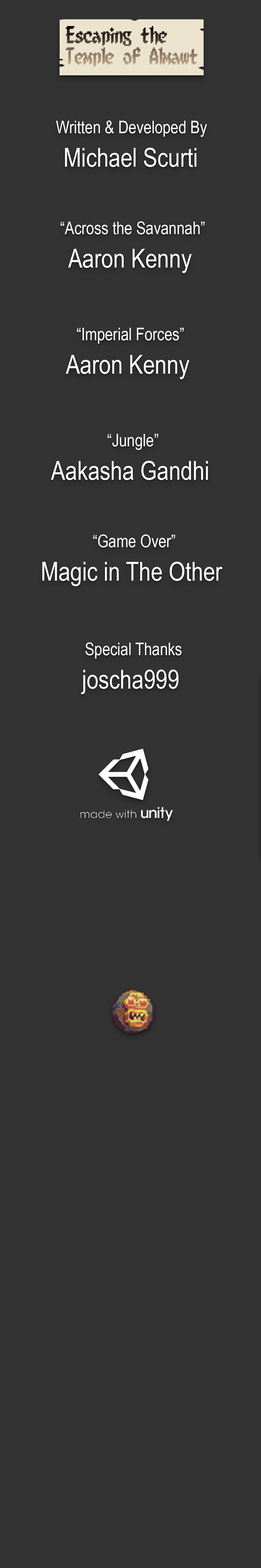
<style>
.page{position:relative;width:261px;height:1568px;background:#333333}
.page>*{position:absolute;margin:0}
.t1{font:17.4px "ArialNarrow";color:#ffffff}
.t2{font:26.1px "ArialNarrow";color:#ffffff}
</style>
<div class="page">
<p class="t1" style="left:56px;top:120px;width:151px;height:17px">Written &amp; Developed By</p>
<p class="t2" style="left:65px;top:148px;width:132px;height:19px">Michael Scurti</p>
<p class="t1" style="left:61px;top:221px;width:144px;height:13px">“Across the Savannah”</p>
<p class="t2" style="left:68px;top:249px;width:124px;height:24px">Aaron Kenny</p>
<p class="t1" style="left:77px;top:328px;width:107px;height:16px">“Imperial Forces”</p>
<p class="t2" style="left:66px;top:355px;width:124px;height:24px">Aaron Kenny</p>
<p class="t1" style="left:108px;top:434px;width:50px;height:16px">“Jungle”</p>
<p class="t2" style="left:51px;top:461px;width:157px;height:19px">Aakasha Gandhi</p>
<p class="t1" style="left:93px;top:534px;width:82px;height:13px">“Game Over”</p>
<p class="t2" style="left:42px;top:562px;width:181px;height:24px">Magic in The Other</p>
<p class="t1" style="left:85px;top:642px;width:97px;height:17px">Special Thanks</p>
<p class="t2" style="left:81px;top:670px;width:98px;height:24px">joscha999</p>
</div>
